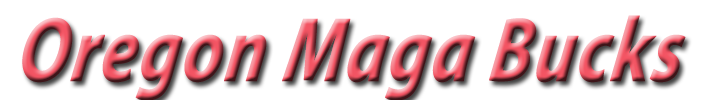
<style>
.page{position:relative;width:706px;height:100px;background:#ffffff}
.page>*{position:absolute;margin:0}
.t1{font:92px "MyriadPro-BoldIt";font-weight:bold;font-style:italic;scale:0.79 1}
</style>
<div class="page">
<p class="t1" style="left:22px;top:15px;width:664px;height:86px">Oregon Maga Bucks</p>
</div>
